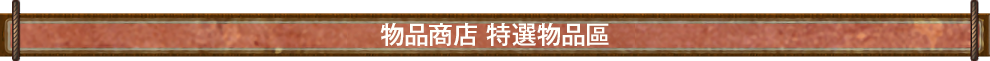
<style>
.page{position:relative;width:990px;height:61px;background:#ffffff}
.page>*{position:absolute;margin:0}
.t1{font:25px "GothicMB101Pr6N-Medium";color:#fffffa}
</style>
<div class="page">
<p class="t1" style="left:380px;top:22px;width:229px;height:24px">物品商店 特選物品區</p>
</div>
